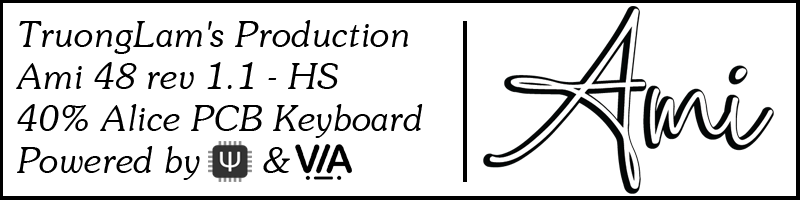
<style>
.page{position:relative;width:800px;height:200px;background:#ffffff}
.page>*{position:absolute;margin:0}
.t1{font:35px "UVNSaigonItalic";color:#000000}
</style>
<div class="page">
<p class="t1" style="left:16px;top:20px;width:407px;height:160px">TruongLam's Production<br>Ami 48 rev 1.1 - HS<br>40% Alice PCB Keyboard<br>Powered by      &amp;</p>
</div>
